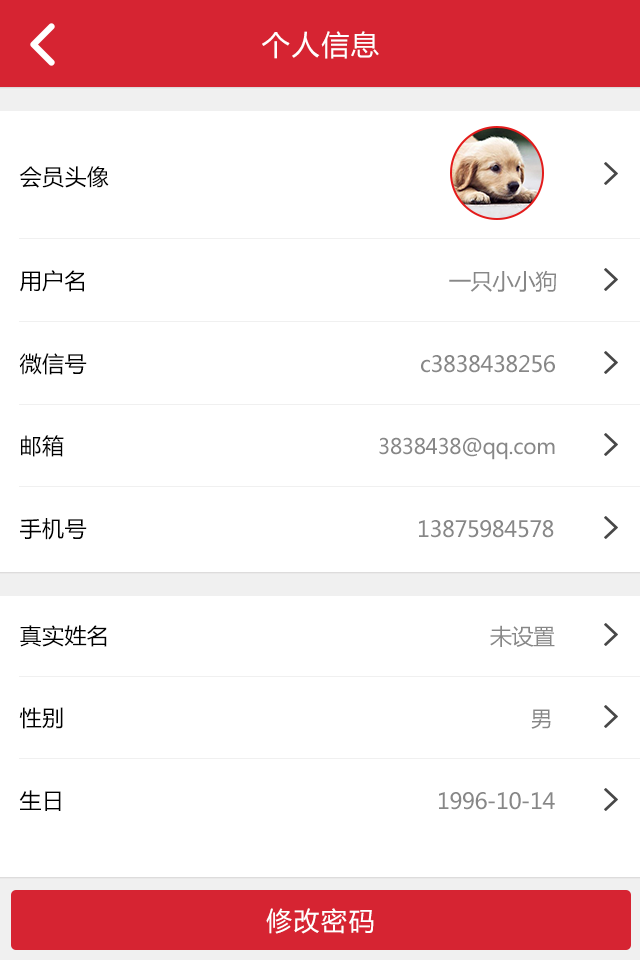
<style>
.page{position:relative;width:640px;height:960px;background:#ffffff}
.page>*{position:absolute;margin:0}
.t1{font:28px "MicrosoftYaHei";letter-spacing:0.06em;color:#ffffff}
.t2{font:22px "MicrosoftYaHei";letter-spacing:0.02em;color:#000000}
.t3{font:22px "MicrosoftYaHei";letter-spacing:-0.02em;color:#878787}
.t4{font:21px "MicrosoftYaHei";letter-spacing:-0.02em;color:#878787}
.t5{font:26px "MicrosoftYaHei";letter-spacing:0.06em;color:#ffffff}
</style>
<div class="page">
<p class="t1" style="left:262px;top:31px;width:117px;height:28px">个人信息</p>
<p class="t2" style="left:19px;top:166px;width:90px;height:22px">会员头像</p>
<p class="t2" style="left:20px;top:270px;width:64px;height:22px">用户名</p>
<p class="t3" style="left:449px;top:270px;width:107px;height:22px">一只小小狗</p>
<p class="t2" style="left:19px;top:353px;width:68px;height:22px">微信号</p>
<p class="t3" style="left:421px;top:355px;width:134px;height:18px">c3838438256</p>
<p class="t2" style="left:21px;top:435px;width:43px;height:22px">邮箱</p>
<p class="t4" style="left:379px;top:437px;width:176px;height:23px">3838438@qq.com</p>
<p class="t2" style="left:20px;top:518px;width:67px;height:22px">手机号</p>
<p class="t3" style="left:419px;top:520px;width:135px;height:18px">13875984578</p>
<p class="t2" style="left:20px;top:625px;width:87px;height:22px">真实姓名</p>
<p class="t3" style="left:490px;top:625px;width:65px;height:22px">未设置</p>
<p class="t2" style="left:19px;top:707px;width:44px;height:22px">性别</p>
<p class="t4" style="left:531px;top:709px;width:20px;height:20px">男</p>
<p class="t2" style="left:19px;top:790px;width:42px;height:21px">生日</p>
<p class="t3" style="left:439px;top:792px;width:116px;height:18px">1996-10-14</p>
<p class="t5" style="left:266px;top:908px;width:108px;height:26px">修改密码</p>
</div>
